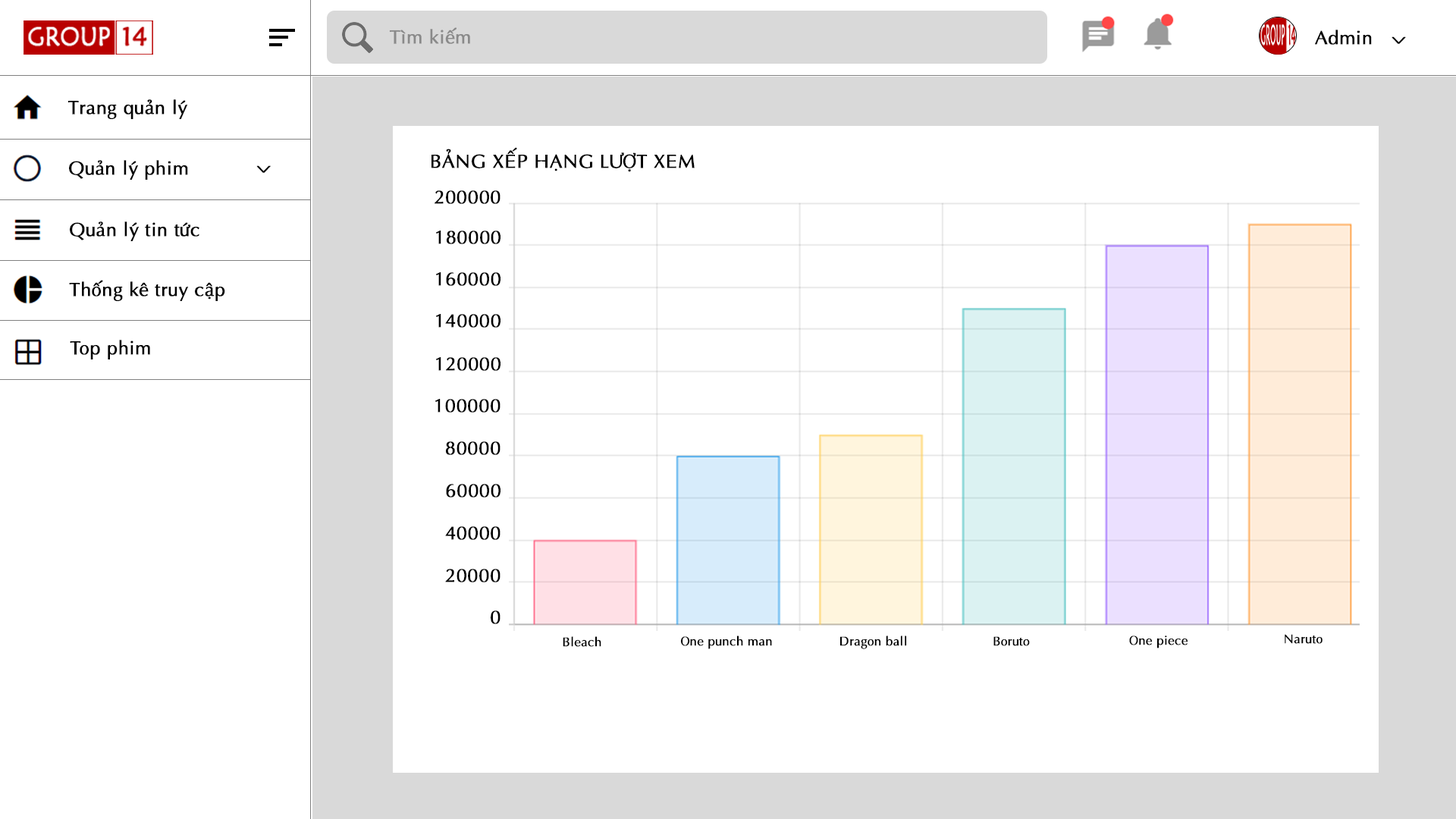
<style>
.page{position:relative;width:1456px;height:819px;background:#ffffff}
.page>*{position:absolute;margin:0}
.t1{font:19px "UTM-Aptima";color:#8a8a8a;font-weight:bold}
.t2{font:19.1px "UTM-Aptima";color:#000000;font-weight:bold}
.t3{font:25.6px "UTM-Aptima";color:#000000;font-weight:bold;scale:0.49 1}
.t4{font:19px "UTM-Aptima";color:#000000;font-weight:bold}
.t5{font:12.6px "UTM-Aptima";color:#000000;font-weight:bold}
</style>
<div class="page">
<p class="t1" style="left:389px;top:27px;width:81px;height:17px">Tìm kiếm</p>
<p class="t2" style="left:1315px;top:30px;width:57px;height:15px">Admin</p>
<p class="t3" style="left:1392px;top:36px;width:14px;height:8px;rotate:-90deg">&lt;</p>
<p class="t4" style="left:67px;top:99px;width:120px;height:21px">Trang quản lý</p>
<p class="t4" style="left:431px;top:147px;width:264px;height:25px">BẢNG XẾP HẠNG LƯỢT XEM</p>
<p class="t4" style="left:69px;top:160px;width:119px;height:20px">Quản lý phim</p>
<p class="t3" style="left:256px;top:165px;width:15px;height:8px;rotate:-90deg">&lt;</p>
<p class="t4" style="left:435px;top:190px;width:65px;height:14px">200000</p>
<p class="t4" style="left:70px;top:221px;width:129px;height:21px">Quản lý tin tức</p>
<p class="t4" style="left:436px;top:231px;width:64px;height:13px">180000</p>
<p class="t4" style="left:69px;top:280px;width:156px;height:21px">Thống kê truy cập</p>
<p class="t4" style="left:436px;top:272px;width:64px;height:14px">160000</p>
<p class="t4" style="left:436px;top:314px;width:64px;height:14px">140000</p>
<p class="t4" style="left:70px;top:340px;width:80px;height:19px">Top phim</p>
<p class="t4" style="left:436px;top:357px;width:64px;height:14px">120000</p>
<p class="t4" style="left:435px;top:399px;width:65px;height:14px">100000</p>
<p class="t4" style="left:446px;top:441px;width:54px;height:14px">80000</p>
<p class="t4" style="left:446px;top:484px;width:54px;height:13px">60000</p>
<p class="t4" style="left:445px;top:526px;width:55px;height:14px">40000</p>
<p class="t4" style="left:445px;top:569px;width:55px;height:13px">20000</p>
<p class="t4" style="left:491px;top:610px;width:9px;height:14px">0</p>
<p class="t5" style="left:563px;top:636px;width:38px;height:11px">Bleach</p>
<p class="t5" style="left:680px;top:635px;width:92px;height:14px">One punch man</p>
<p class="t5" style="left:839px;top:635px;width:68px;height:14px">Dragon ball</p>
<p class="t5" style="left:993px;top:636px;width:37px;height:10px">Boruto</p>
<p class="t5" style="left:1129px;top:635px;width:59px;height:13px">One piece</p>
<p class="t5" style="left:1285px;top:634px;width:38px;height:10px">Naruto</p>
</div>
